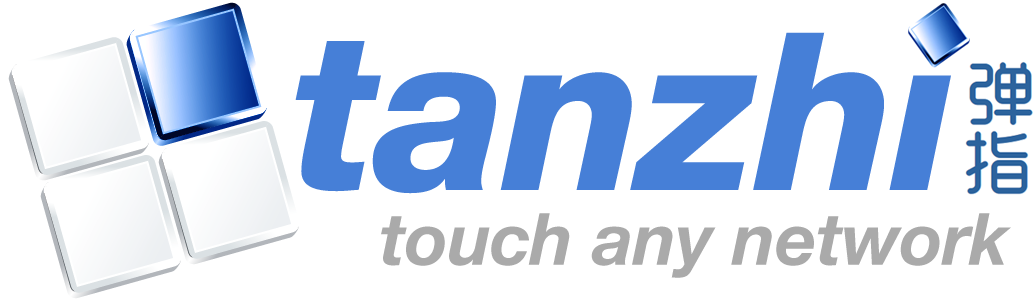
<style>
.page{position:relative;width:1036px;height:299px;background:#ffffff}
.page>*{position:absolute;margin:0}
.t1{font:220px "HelveticaNeueLTStd-HvIt";letter-spacing:-0.01em;color:#467fd7}
.t2{font:72px "HelveticaNeueLTStd-BdIt";letter-spacing:-0.01em;color:#aaaaaa}
</style>
<div class="page">
<p class="t1" style="left:295px;top:32px;width:665px;height:162px">tanzhi</p>
<p class="t2" style="left:381px;top:213px;width:630px;height:65px">touch any network</p>
</div>
